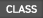
<style>
.page{position:relative;width:43px;height:18px;background:#555555}
.page>*{position:absolute;margin:0}
.t1{font:10px "HCRDotum-Bold";color:#ffffff}
</style>
<div class="page">
<p class="t1" style="left:6px;top:5px;width:31px;height:8px">CLASS</p>
</div>
